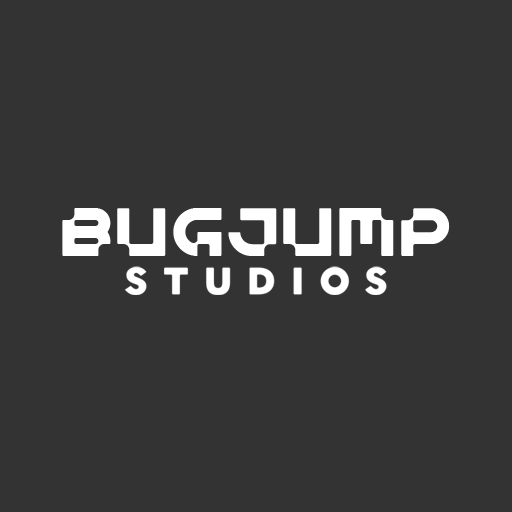
<style>
.page{position:relative;width:512px;height:512px;background:#333333}
.page>*{position:absolute;margin:0}
.t1{font:66.7px "MOJANGABC";color:#ffffff}
</style>
<div class="page">
<p class="t1" style="left:62px;top:208px;width:388px;height:48px">BUGJUMP</p>
</div>
